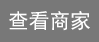
<style>
.page{position:relative;width:99px;height:42px;background:#787878}
.page>*{position:absolute;margin:0}
.t1{font:20.8px "SimHei";color:#ffffff;text-transform:uppercase}
</style>
<div class="page">
<p class="t1" style="left:9px;top:11px;width:81px;height:20px">查看商家</p>
</div>
